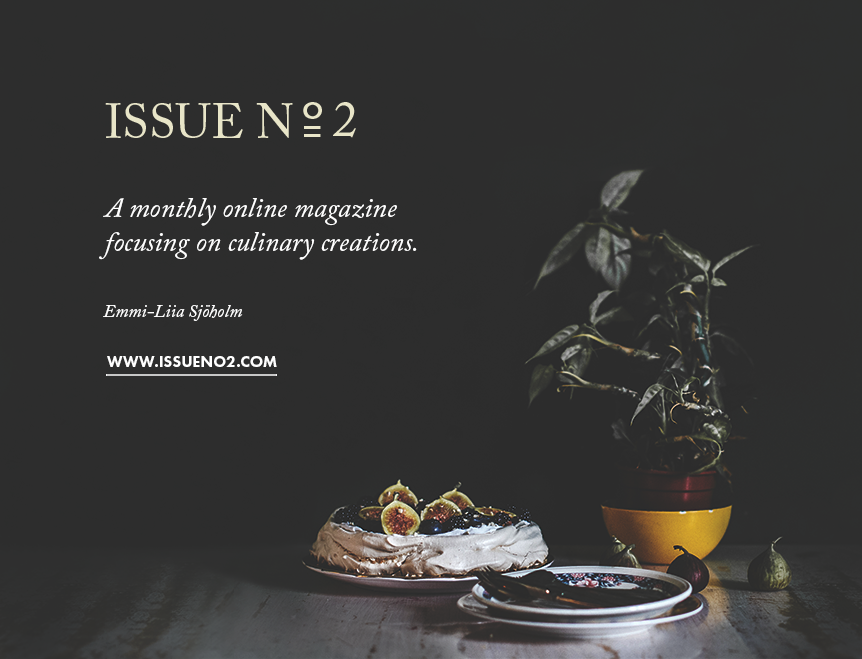
<style>
.page{position:relative;width:862px;height:659px;background:#2d2d2d}
.page>*{position:absolute;margin:0}
.t1{font:28px "ACaslonPro-Italic";color:#ffffff}
.t2{font:18px "ACaslonPro-Italic";color:#ffffff}
.t3{font:16px "FuturaPT-Heavy";color:#ffffff}
</style>
<div class="page">
<p class="t1" style="left:99px;top:198px;width:318px;height:62px">A monthly online magazine focusing on culinary creations.</p>
<p class="t2" style="left:103px;top:305px;width:140px;height:16px">Emmi-Liia Sjöholm</p>
<p class="t3" style="left:107px;top:356px;width:170px;height:11px">WWW.ISSUENO2.COM</p>
</div>
